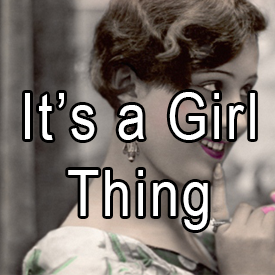
<style>
.page{position:relative;width:275px;height:275px}
.page>*{position:absolute;margin:0}
.t1{font:64px "ArialNarrow";letter-spacing:0.05em;color:#ffffff}
</style>
<div class="page">
<p class="t1" style="left:25px;top:92px;width:230px;height:138px;text-align:center">It’s a Girl<br>Thing</p>
</div>
